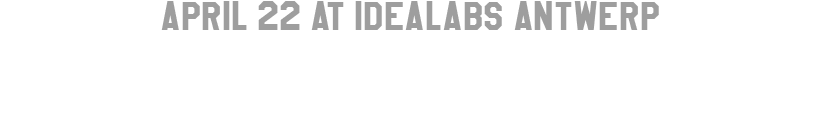
<style>
.page{position:relative;width:821px;height:120px;background:#ffffff}
.page>*{position:absolute;margin:0}
.t1{font:36px "HighSchoolUSASans";color:#9e9e9e}
</style>
<div class="page">
<p class="t1" style="left:161px;top:1px;width:498px;height:29px">APRIL 22 at IDEALABS ANTWERP</p>
</div>
